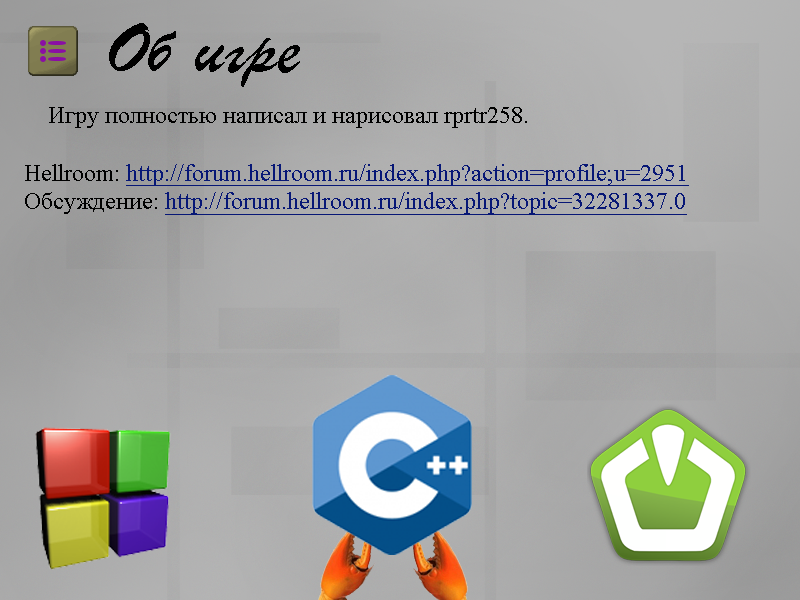
<style>
.page{position:relative;width:800px;height:600px}
.page>*{position:absolute;margin:0}
.t1{font:24px "TimesNewRomanPSMT";color:#071776;text-decoration:underline}
.t2{font:24px "TimesNewRomanPSMT";color:#000000}
</style>
<div class="page">
<p class="t1" style="left:25px;top:107px;width:664px;height:108px"><span class="t2">    Игру полностью написал и нарисовал rprtr258.<br><br>Hellroom: </span>http://forum.hellroom.ru/index.php?action=profile;u=2951<br><span class="t2">Обсуждение: </span>http://forum.hellroom.ru/index.php?topic=32281337.0</p>
</div>
